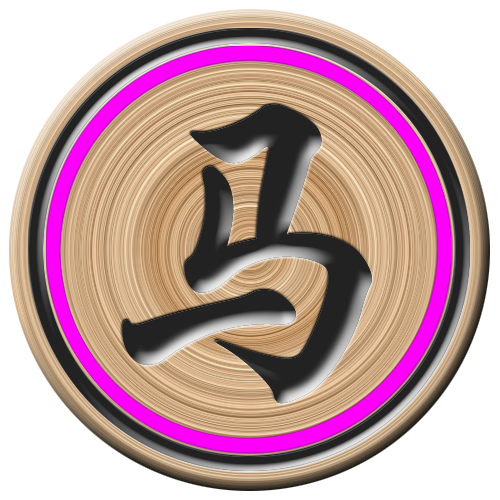
<style>
.page{position:relative;width:500px;height:500px;background:#ffffff}
.page>*{position:absolute;margin:0}
.t1{font:360px "STXingkai"}
</style>
<div class="page">
<p class="t1" style="left:122px;top:104px;width:250px;height:300px">马</p>
</div>
